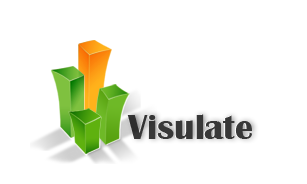
<style>
.page{position:relative;width:307px;height:184px;background:#ffffff}
.page>*{position:absolute;margin:0}
.t1{font:36px "BritannicBold";color:#383838}
</style>
<div class="page">
<p class="t1" style="left:126px;top:114px;width:125px;height:25px">Visulate</p>
<p class="t1" style="left:127px;top:114px;width:125px;height:25px">Visulate</p>
</div>
